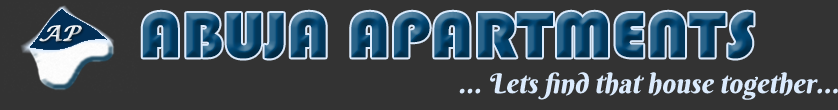
<style>
.page{position:relative;width:838px;height:110px;background:#333333}
.page>*{position:absolute;margin:0}
.t1{font:66.4px "Bauhaus93";scale:1.08 1}
.t2{font:20.7px "LucidaCalligraphy-Italic";color:#eef3f7;font-weight:bold;font-style:italic;scale:1.08 1}
.t3{font:27.3px "BerkshireSwash-Regular";letter-spacing:0.01em;color:#dbebfd;font-style:italic}
</style>
<div class="page">
<p class="t1" style="left:142px;top:11px;width:612px;height:48px">ABUJA APARTMENTS</p>
<p class="t2" style="left:39px;top:25px;width:43px;height:17px">AP</p>
<p class="t3" style="left:459px;top:72px;width:379px;height:28px">... Lets find that house together...</p>
</div>
